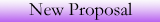
<style>
.page{position:relative;width:160px;height:22px}
.page>*{position:absolute;margin:0}
.t1{font:18.7px "Garamond";color:#000000}
</style>
<div class="page">
<p class="t1" style="left:29px;top:2px;width:104px;height:18px">New Proposal</p>
</div>
